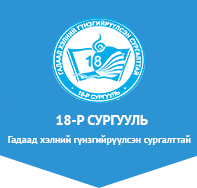
<style>
.page{position:relative;width:197px;height:188px;background:#2c93d5}
.page>*{position:absolute;margin:0}
.t1{font:14px "PTSans-Bold";color:#ffffff}
.t2{font:10px "PTSans-Bold";color:#ffffff}
</style>
<div class="page">
<p class="t1" style="left:56px;top:115px;width:92px;height:10px">18-Р СУРГУУЛЬ</p>
<p class="t2" style="left:8px;top:135px;width:183px;height:10px">Гадаад хэлний гүнзгийрүүлсэн сургалттай</p>
</div>
